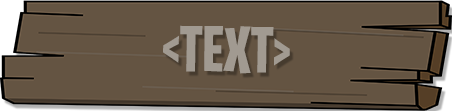
<style>
.page{position:relative;width:452px;height:111px;background:#645442}
.page>*{position:absolute;margin:0}
.t1{font:65px "BurbankBigCondensed-Bold";color:#a19a91}
</style>
<div class="page">
<p class="t1" style="left:163px;top:25px;width:127px;height:49px;rotate:1deg">&lt;TEXT&gt;</p>
</div>
